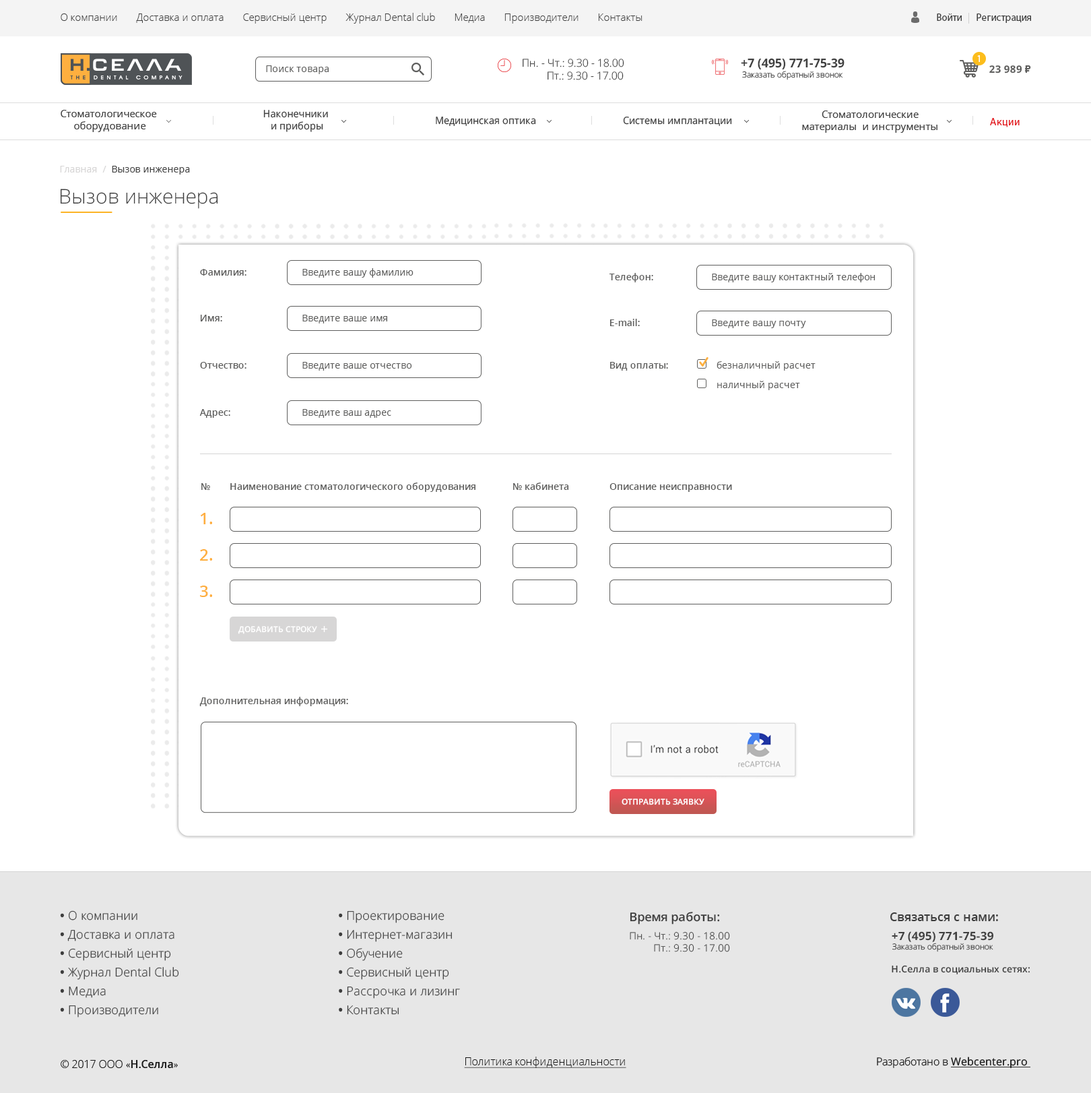
<style>
.page{position:relative;width:1091px;height:1093px;background:#ffffff}
.page>*{position:absolute;margin:0}
.t1{font:10.1px "OpenSans-Light";color:#3e3e3e}
.t2{font:10.1px "MyriadPro-Regular";color:#3e3e3e}
.t3{font:9.6px "OpenSans-Regular";color:#5e5e5d}
.t4{font:10.7px "OpenSans-Light";color:#414141}
.t5{font:8.3px "OpenSans-Light";color:#414141}
.t6{font:12.3px "OpenSans-Bold";color:#414141}
.t7{font:9.4px "MyriadPro-Regular";color:#ffffff}
.t8{font:10.1px "OpenSans-Bold";color:#5e5e5d}
.t9{font:10.1px "Arial-BoldMT";color:#5e5e5d}
.t10{font:10.1px "OpenSans";color:#414141}
.t11{font:10.1px "OpenSans";color:#414141;scale:0.97 1}
.t12{font:10.8px "MyriadPro-Regular";color:#e3161c}
.t13{font:9.4px "OpenSans-Regular";color:#414141}
.t14{font:9.4px "OpenSans-Regular";color:#d7d6d6}
.t15{font:20.2px "OpenSans-Light";color:#3e3e3e}
.t16{font:9.4px "OpenSans-SemiBold";color:#5e5e5d}
.t17{font:9.4px "OpenSans-Regular";color:#5e5e5d}
.t18{font:16.2px "OpenSans-SemiBold";color:#feaf3f}
.t19{font:8.1px "OpenSans-SemiBold";color:#ffffff}
.t20{font:12.1px/18.9px "OpenSans-Light";color:#3e3e3e}
.t21{font:12.1px/18.9px "OpenSans-Bold";color:#3e3e3e}
.t22{font:10px "OpenSans-Light";color:#3e3e3e}
.t23{font:12.1px/6.1px "OpenSans-SemiBold";color:#3e3e3e}
.t24{font:12.1px "OpenSans-SemiBold";color:#3e3e3e}
.t25{font:8.1px "OpenSans-Light";color:#414141}
.t26{font:11.5px "OpenSans-Bold";color:#414141}
.t27{font:9.4px "OpenSans-SemiBold";color:#3e3e3e}
.t28{font:10.8px "OpenSans-Light";color:#181818}
.t29{font:10.8px "MinionPro-Regular";color:#181818}
.t30{font:10.8px "OpenSans-Semibold";color:#181818}
.t31{font:10.8px "OpenSans-Light";color:#181818;text-decoration:underline}
.t32{font:10.8px "OpenSans";color:#181818;text-decoration:underline}
</style>
<div class="page">
<p class="t1" style="left:61px;top:13px;width:970px;height:11px">О компании       Доставка и оплата       Сервисный центр       Журнал Dental club       Медиа       Производители       Контакты                                                                                                             <span class="t2">Войти       Регистрация</span></p>
<p class="t3" style="left:266px;top:65px;width:63px;height:9px">Поиск товара</p>
<p class="t4" style="left:523px;top:59px;width:101px;height:21px;text-align:center">Пн. - Чт.: 9.30 - 18.00<br>         Пт.: 9.30 - 17.00</p>
<p class="t5" style="left:741px;top:58px;width:104px;height:22px;text-align:center"><span class="t6">+7 (495) 771-75-39<br></span>Заказать обратный звонок</p>
<p class="t7" style="left:977px;top:55px;width:3px;height:7px">1</p>
<p class="t8" style="left:990px;top:65px;width:41px;height:8px">23 989 <span class="t9">₽</span></p>
<p class="t10" style="left:61px;top:110px;width:96px;height:22px;text-align:center">Стоматологическое <br>оборудование</p>
<p class="t11" style="left:263px;top:110px;width:65px;height:22px;text-align:center">Наконечники <br>и приборы</p>
<p class="t10" style="left:802px;top:110px;width:136px;height:23px;text-align:center">Стоматологические <br>материалы  и инструменты</p>
<p class="t11" style="left:436px;top:117px;width:100px;height:9px">Медицинская оптика</p>
<p class="t11" style="left:623px;top:117px;width:109px;height:9px">Системы имплантации</p>
<p class="t12" style="left:990px;top:118px;width:30px;height:9px">Акции</p>
<p class="t13" style="left:60px;top:166px;width:130px;height:8px"><span class="t14">Главная  /  </span>Вызов инженера</p>
<p class="t15" style="left:60px;top:189px;width:158px;height:20px">Вызов инженера</p>
<p class="t16" style="left:200px;top:269px;width:47px;height:7px">Фамилия:</p>
<p class="t17" style="left:302px;top:268px;width:112px;height:10px">Введите вашу фамилию</p>
<p class="t16" style="left:609px;top:273px;width:44px;height:9px">Телефон:</p>
<p class="t17" style="left:712px;top:273px;width:163px;height:9px">Введите вашу контактный телефон</p>
<p class="t16" style="left:200px;top:315px;width:22px;height:6px">Имя:</p>
<p class="t17" style="left:302px;top:315px;width:85px;height:8px">Введите ваше имя</p>
<p class="t16" style="left:610px;top:319px;width:30px;height:7px">E-mail:</p>
<p class="t17" style="left:712px;top:319px;width:94px;height:9px">Введите вашу почту</p>
<p class="t16" style="left:200px;top:362px;width:47px;height:6px">Отчество:</p>
<p class="t17" style="left:302px;top:362px;width:110px;height:9px">Введите ваше отчество</p>
<p class="t16" style="left:610px;top:362px;width:58px;height:9px">Вид оплаты:</p>
<p class="t17" style="left:717px;top:361px;width:99px;height:10px">безналичный расчет</p>
<p class="t17" style="left:717px;top:381px;width:83px;height:9px">наличный расчет</p>
<p class="t16" style="left:199px;top:409px;width:31px;height:9px">Адрес:</p>
<p class="t17" style="left:302px;top:409px;width:89px;height:9px">Введите ваш адрес</p>
<p class="t16" style="left:201px;top:483px;width:9px;height:7px">№</p>
<p class="t16" style="left:230px;top:482px;width:246px;height:10px">Наименование стоматологического оборудования</p>
<p class="t16" style="left:513px;top:482px;width:56px;height:8px">№ кабинета</p>
<p class="t16" style="left:610px;top:483px;width:122px;height:9px">Описание неисправности</p>
<p class="t18" style="left:200px;top:513px;width:12px;height:11px">1.</p>
<p class="t18" style="left:200px;top:549px;width:12px;height:11px">2.</p>
<p class="t18" style="left:200px;top:585px;width:12px;height:12px">3.</p>
<p class="t19" style="left:238px;top:626px;width:79px;height:8px">ДОБАВИТЬ СТРОКУ</p>
<p class="t16" style="left:199px;top:697px;width:149px;height:9px">Дополнительная информация:</p>
<p class="t19" style="left:622px;top:798px;width:83px;height:7px">ОТПРАВИТЬ ЗАЯВКУ</p>
<p class="t20" style="left:60px;top:910px;width:119px;height:107px"><span class="t21">•</span> О компании<br><span class="t21">•</span> Доставка и оплата<br><span class="t21">•</span> Сервисный центр<br><span class="t21">•</span> Журнал Dental Club<br><span class="t21">•</span> Медиа<br><span class="t21">•</span> Производители</p>
<p class="t20" style="left:339px;top:911px;width:121px;height:104px"><span class="t21">•</span> Проектирование<br><span class="t21">•</span> Интернет-магазин<br><span class="t21">•</span> Обучение<br><span class="t21">•</span> Сервисный центр<br><span class="t21">•</span> Рассрочка и лизинг<br><span class="t21">•</span> Контакты</p>
<p class="t22" style="left:630px;top:911px;width:100px;height:41px"><span class="t23">Время работы:<br><br></span>Пн. - Чт.: 9.30 - 18.00<br>         Пт.: 9.30 - 17.00</p>
<p class="t24" style="left:891px;top:912px;width:107px;height:9px">Связаться с нами:</p>
<p class="t25" style="left:892px;top:931px;width:102px;height:21px;text-align:center"><span class="t26">+7 (495) 771-75-39<br></span>Заказать обратный звонок</p>
<p class="t27" style="left:892px;top:965px;width:138px;height:9px">Н.Селла в социальныx сетях:</p>
<p class="t28" style="left:61px;top:1060px;width:117px;height:8px">© 2017 ООО <span class="t29">«</span><span class="t30">Н.Селла</span><span class="t29">»</span></p>
<p class="t31" style="left:464px;top:1056px;width:162px;height:12px">Политика конфиденциальности</p>
<p class="t28" style="left:877px;top:1056px;width:154px;height:12px">Разработано в <span class="t32">Webcenter.pro</span></p>
</div>
